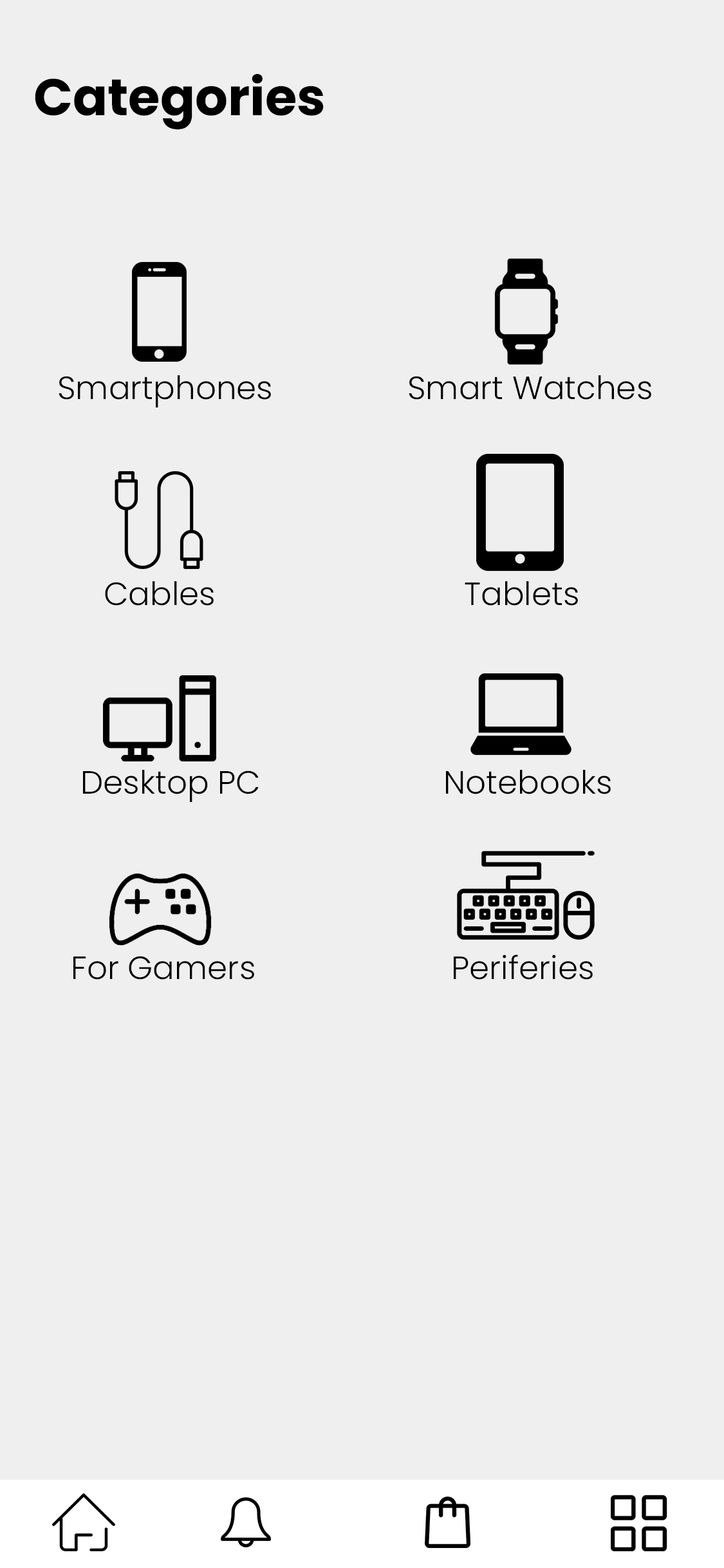
<style>
.page{position:relative;width:724px;height:1568px;background:#efefef}
.page>*{position:absolute;margin:0}
.t1{font:51.5px "Poppins-Bold";color:#000000}
.t2{font:32.2px "Poppins-Light";color:#000000}
</style>
<div class="page">
<p class="t1" style="left:35px;top:74px;width:289px;height:55px">Categories</p>
<p class="t2" style="left:59px;top:375px;width:212px;height:32px">Smartphones</p>
<p class="t2" style="left:409px;top:375px;width:242px;height:25px">Smart Watches</p>
<p class="t2" style="left:105px;top:581px;width:109px;height:25px">Cables</p>
<p class="t2" style="left:465px;top:581px;width:113px;height:25px">Tablets</p>
<p class="t2" style="left:83px;top:770px;width:176px;height:32px">Desktop PC</p>
<p class="t2" style="left:446px;top:770px;width:165px;height:24px">Notebooks</p>
<p class="t2" style="left:73px;top:956px;width:181px;height:24px">For Gamers</p>
<p class="t2" style="left:454px;top:955px;width:139px;height:25px">Periferies</p>
</div>
